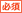
<style>
.page{position:relative;width:22px;height:13px;background:#ffffff}
.page>*{position:absolute;margin:0}
.t1{font:9px "Meiryo-Bold";color:#f4461e}
</style>
<div class="page">
<p class="t1" style="left:2px;top:2px;width:18px;height:9px">必須</p>
</div>
